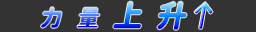
<style>
.page{position:relative;width:256px;height:32px;background:#333333}
.page>*{position:absolute;margin:0}
.t1{font:30px "JiangChengYuanTi-700W";font-style:italic}
.t2{font:22px "JiangChengYuanTi-700W";font-style:italic}
</style>
<div class="page">
<p class="t1" style="left:113px;top:1px;width:74px;height:29px">上  升</p>
<p class="t2" style="left:41px;top:7px;width:59px;height:21px">力   量</p>
</div>
